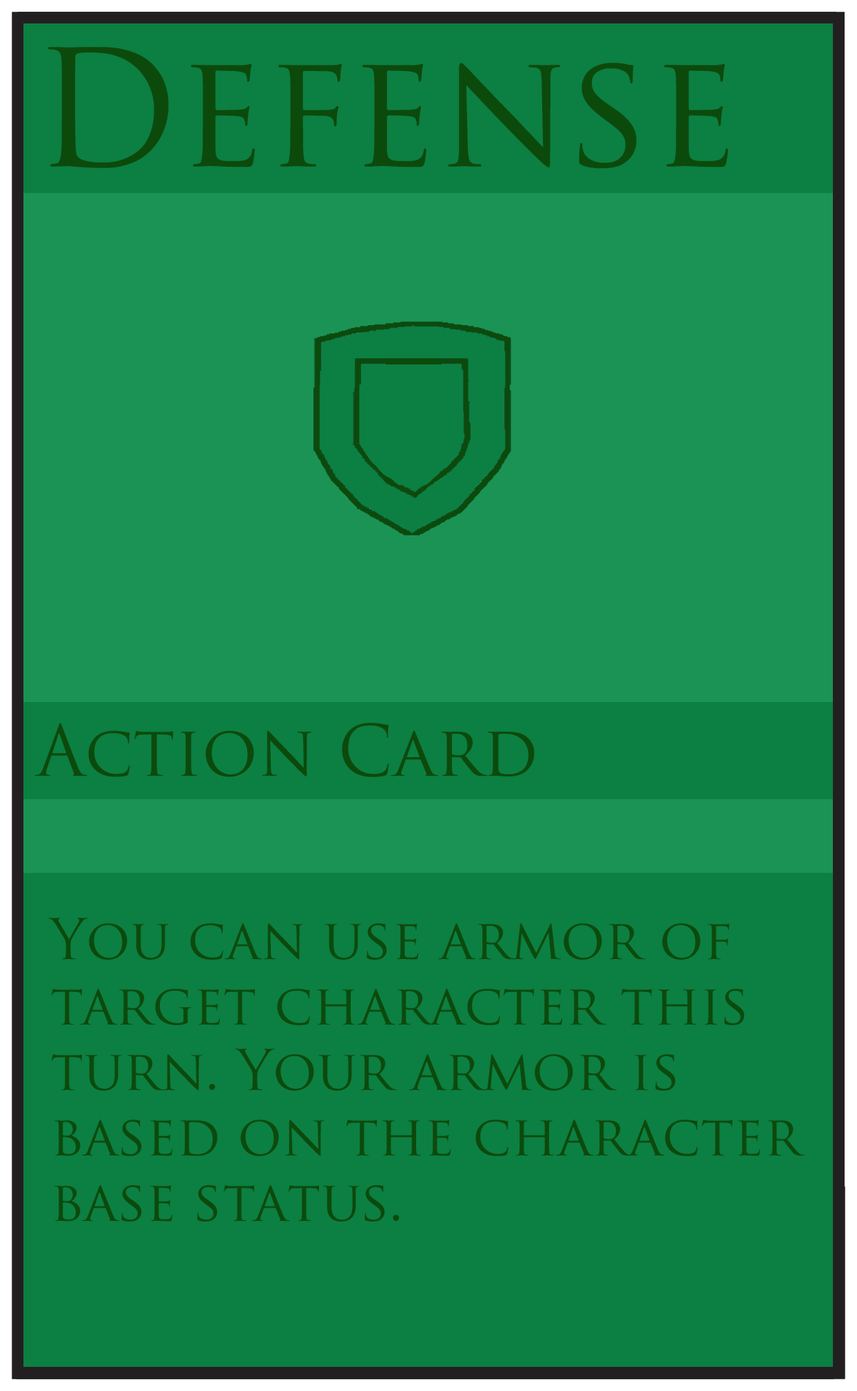
<style>
.page{position:relative;width:857px;height:1391px;background:#0c7f42}
.page>*{position:absolute;margin:0}
.t1{font:157.9px "TrajanPro-Regular";color:#0c4a0c}
.t2{font:68.9px "TrajanPro-Regular";color:#0c4a0c}
.t3{font:54.5px "TrajanPro-Regular";color:#0c4a0c}
</style>
<div class="page">
<p class="t1" style="left:48px;top:47px;width:680px;height:122px">Defense</p>
<p class="t2" style="left:34px;top:723px;width:501px;height:54px">Action Card</p>
<p class="t3" style="left:48px;top:918px;width:757px;height:304px">You can use armor of <br>target character this <br>turn. Your armor is <br>based on the character <br>base status.</p>
</div>
